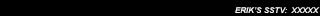
<style>
.page{position:relative;width:320px;height:16px;background:#000000}
.page>*{position:absolute;margin:0}
.t1{font:8px "Arial-BoldItalicMT";color:#ffffff}
</style>
<div class="page">
<p class="t1" style="left:235px;top:7px;width:85px;height:6px">ERIK’S SSTV:  XXXXX</p>
</div>
